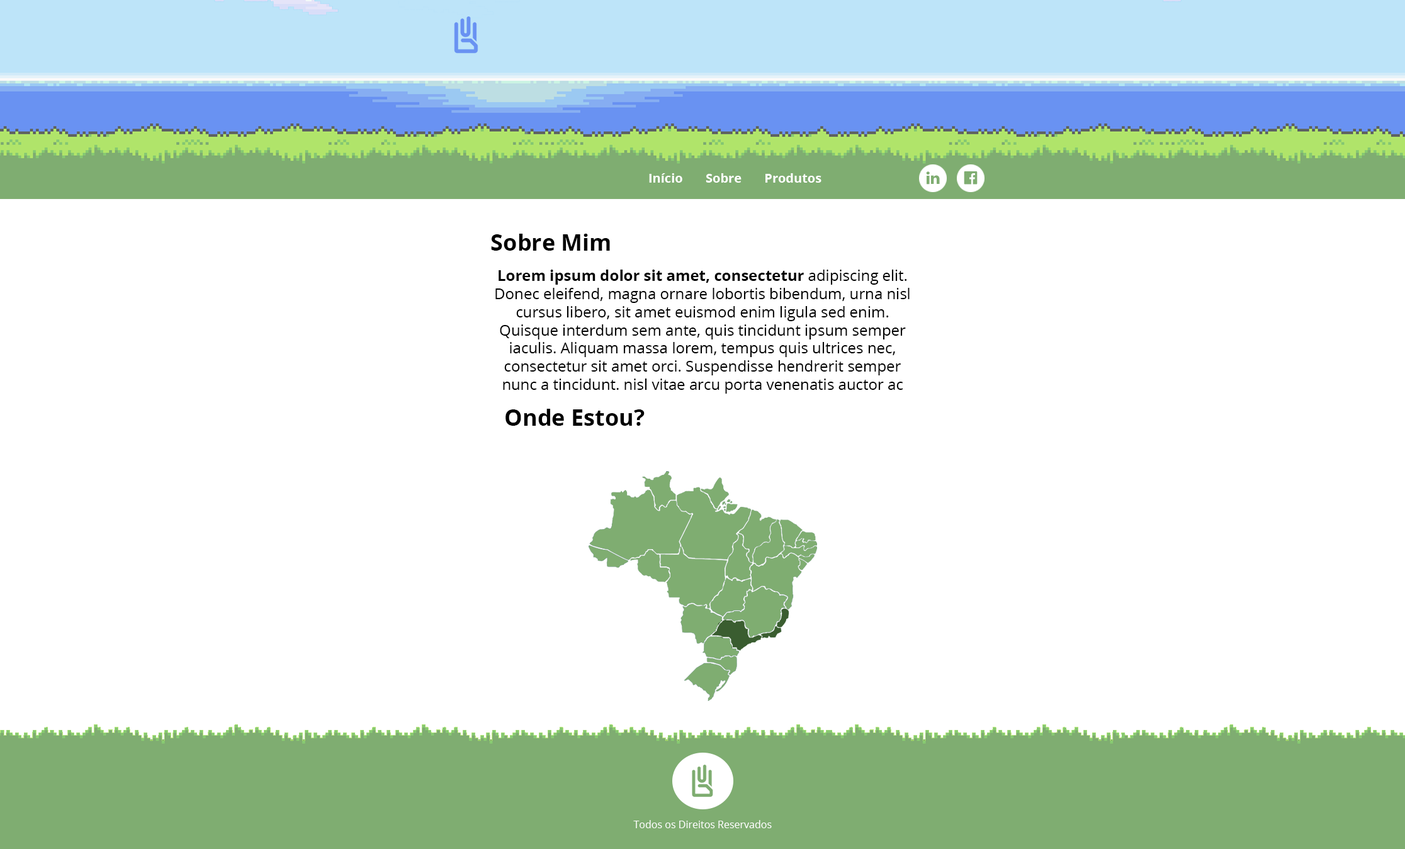
<style>
.page{position:relative;width:1405px;height:849px;background:#ffffff}
.page>*{position:absolute;margin:0}
.t1{font:12.6px "OpenSans-Bold";color:#ffffff}
.t2{font:22.7px "OpenSans-Bold";color:#000000}
.t3{font:15.1px "OpenSans";color:#000000}
.t4{font:15.1px "OpenSans-Bold";color:#000000}
.t5{font:10.1px "OpenSans";color:#ffffff}
</style>
<div class="page">
<p class="t1" style="left:649px;top:173px;width:173px;height:10px">Início       Sobre       Produtos</p>
<p class="t2" style="left:491px;top:234px;width:119px;height:17px">Sobre Mim</p>
<p class="t3" style="left:495px;top:269px;width:415px;height:124px;text-align:center"><span class="t4">Lorem ipsum dolor sit amet, consectetur </span>adipiscing elit. Donec eleifend, magna ornare lobortis bibendum, urna nisl cursus libero, sit amet euismod enim ligula sed enim. Quisque interdum sem ante, quis tincidunt ipsum semper iaculis. Aliquam massa lorem, tempus quis ultrices nec, consectetur sit amet orci. Suspendisse hendrerit semper nunc a tincidunt. nisl vitae arcu porta venenatis auctor ac velit.</p>
<p class="t2" style="left:506px;top:409px;width:139px;height:17px">Onde Estou?</p>
<p class="t5" style="left:633px;top:820px;width:139px;height:8px">Todos os Direitos Reservados</p>
</div>
